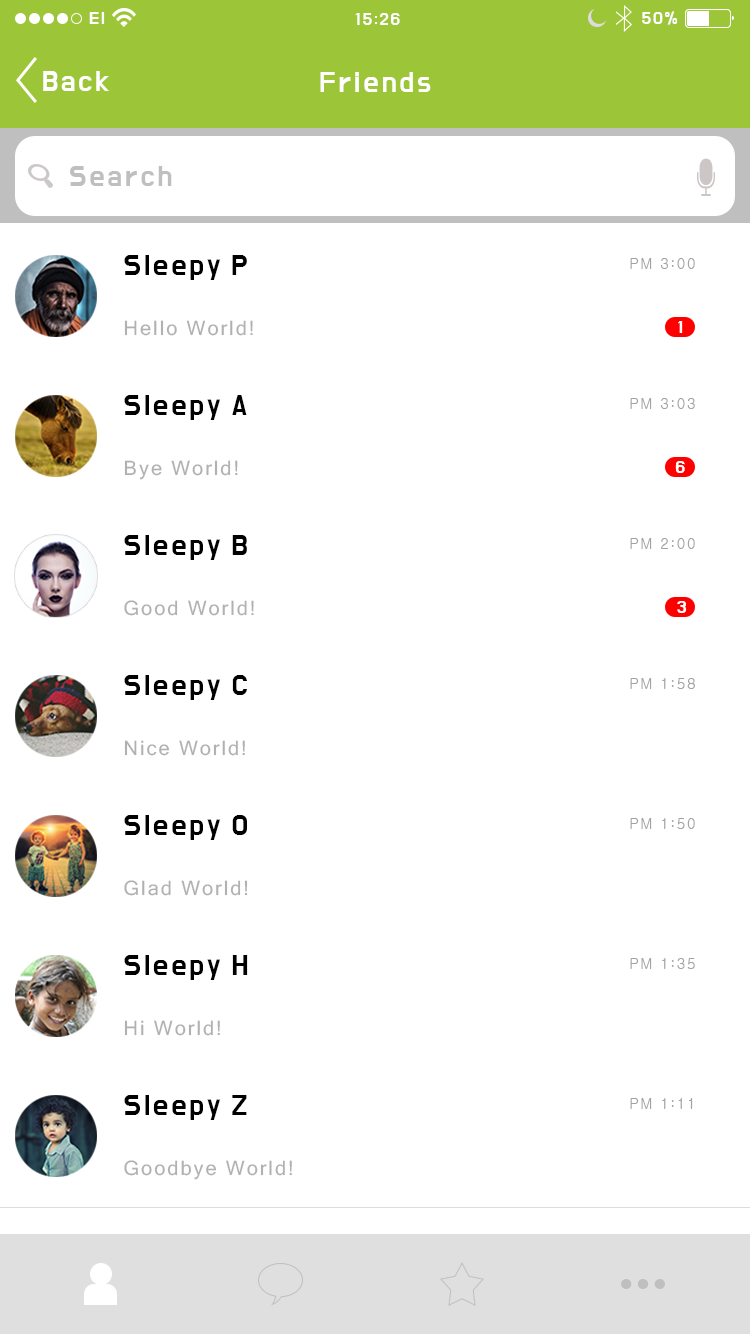
<style>
.page{position:relative;width:750px;height:1334px;background:#ffffff}
.page>*{position:absolute;margin:0}
.t1{font:18px "DoHyeon-Regular";letter-spacing:0.1em;color:#ffffff}
.t2{font:30px "DoHyeon-Regular";letter-spacing:0.1em;color:#ffffff}
.t3{font:30px "DoHyeon-Regular";letter-spacing:0.1em;color:#bfbfbf}
.t4{font:30px "DoHyeon-Regular";letter-spacing:0.1em;color:#000000}
.t5{font:15px "Gulim";letter-spacing:0.1em;color:#a3a3a3}
.t6{font:20px "MicrosoftSansSerif";letter-spacing:0.1em;color:#b1b1b1}
</style>
<div class="page">
<p class="t1" style="left:89px;top:12px;width:16px;height:12px">El</p>
<p class="t1" style="left:355px;top:13px;width:45px;height:12px">15:26</p>
<p class="t1" style="left:642px;top:11px;width:36px;height:14px">50%</p>
<p class="t2" style="left:43px;top:71px;width:66px;height:20px">Back</p>
<p class="t2" style="left:320px;top:72px;width:111px;height:20px">Friends</p>
<p class="t3" style="left:70px;top:166px;width:102px;height:20px">Search</p>
<p class="t4" style="left:124px;top:255px;width:123px;height:25px">Sleepy P</p>
<p class="t5" style="left:630px;top:258px;width:65px;height:11px">PM 3:00</p>
<p class="t6" style="left:124px;top:320px;width:129px;height:16px">Hello World!</p>
<p class="t1" style="left:678px;top:321px;width:5px;height:12px">1</p>
<p class="t4" style="left:124px;top:395px;width:123px;height:25px">Sleepy A</p>
<p class="t5" style="left:630px;top:398px;width:65px;height:11px">PM 3:03</p>
<p class="t6" style="left:124px;top:460px;width:114px;height:20px">Bye World!</p>
<p class="t1" style="left:675px;top:461px;width:10px;height:12px">6</p>
<p class="t4" style="left:124px;top:535px;width:123px;height:25px">Sleepy B</p>
<p class="t5" style="left:630px;top:538px;width:65px;height:11px">PM 2:00</p>
<p class="t6" style="left:124px;top:600px;width:130px;height:16px">Good World!</p>
<p class="t1" style="left:677px;top:601px;width:10px;height:12px">3</p>
<p class="t4" style="left:124px;top:675px;width:123px;height:25px">Sleepy C</p>
<p class="t5" style="left:630px;top:678px;width:65px;height:11px">PM 1:58</p>
<p class="t6" style="left:124px;top:740px;width:121px;height:16px">Nice World!</p>
<p class="t4" style="left:124px;top:815px;width:123px;height:25px">Sleepy O</p>
<p class="t5" style="left:630px;top:818px;width:65px;height:11px">PM 1:50</p>
<p class="t6" style="left:124px;top:880px;width:124px;height:16px">Glad World!</p>
<p class="t4" style="left:124px;top:955px;width:124px;height:25px">Sleepy H</p>
<p class="t5" style="left:630px;top:958px;width:65px;height:11px">PM 1:35</p>
<p class="t6" style="left:124px;top:1020px;width:96px;height:16px">Hi World!</p>
<p class="t4" style="left:124px;top:1095px;width:123px;height:25px">Sleepy Z</p>
<p class="t5" style="left:630px;top:1098px;width:63px;height:11px">PM 1:11</p>
<p class="t6" style="left:124px;top:1160px;width:168px;height:20px">Goodbye World!</p>
</div>
